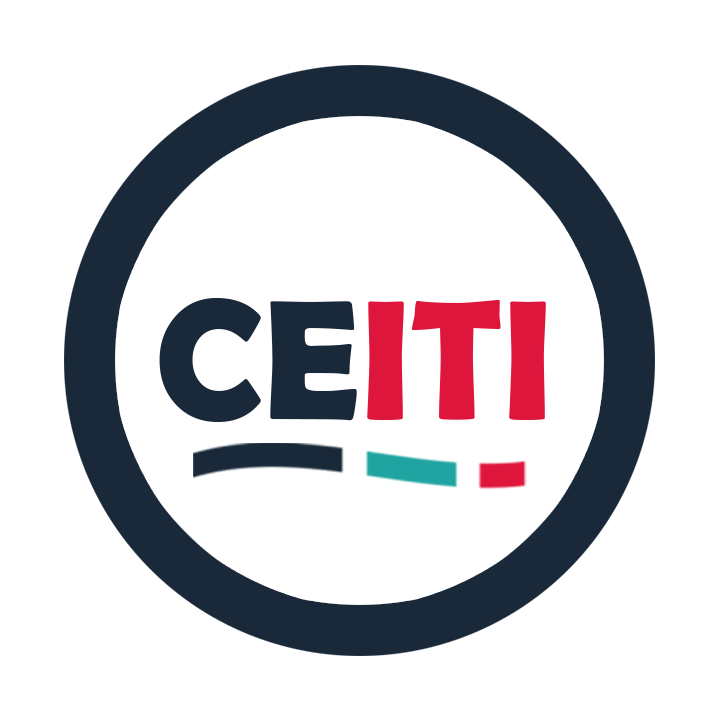
<style>
.page{position:relative;width:720px;height:720px;background:#ffffff}
.page>*{position:absolute;margin:0}
.t1{font:172px "BerlinSansFBDemi-Bold";color:#df163c}
.t2{font:172px "BerlinSansFBDemi-Bold";color:#1a293a}
</style>
<div class="page">
<p class="t1" style="left:159px;top:298px;width:387px;height:124px"><span class="t2">CE</span>ITI</p>
</div>
